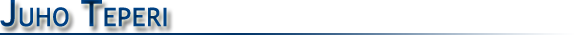
<style>
.page{position:relative;width:575px;height:35px;background:#ffffff}
.page>*{position:absolute;margin:0}
.t1{font:36px "TrebuchetMS";color:#003f81;font-variant:small-caps;font-weight:bold}
</style>
<div class="page">
<p class="t1" style="left:0px;top:0px;width:167px;height:27px">Juho Teperi</p>
</div>
